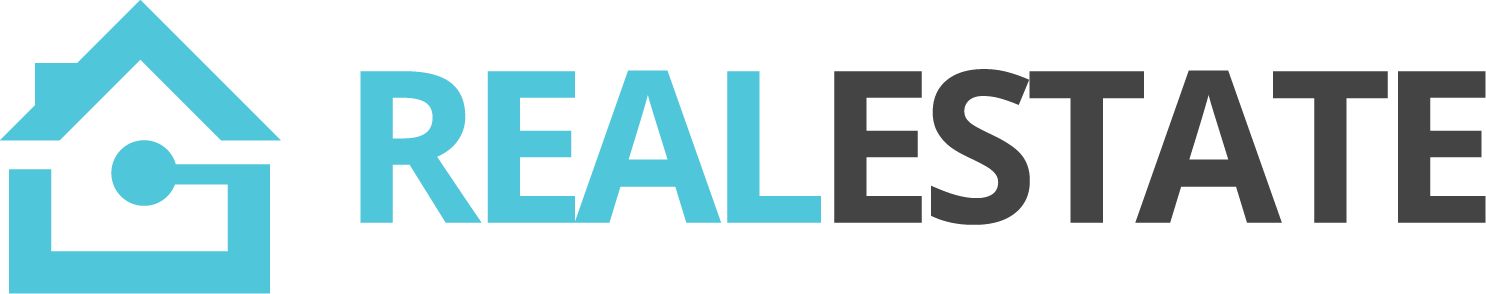
<style>
.page{position:relative;width:1486px;height:294px;background:#ffffff}
.page>*{position:absolute;margin:0}
.t1{font:212px "OpenSans-Bold";letter-spacing:-0.06em;color:#444444}
.t2{font:212px "OpenSans-Bold";letter-spacing:-0.06em;color:#50c6db}
</style>
<div class="page">
<p class="t1" style="left:360px;top:69px;width:1126px;height:156px"><span class="t2">REAL</span>ESTATE</p>
</div>
